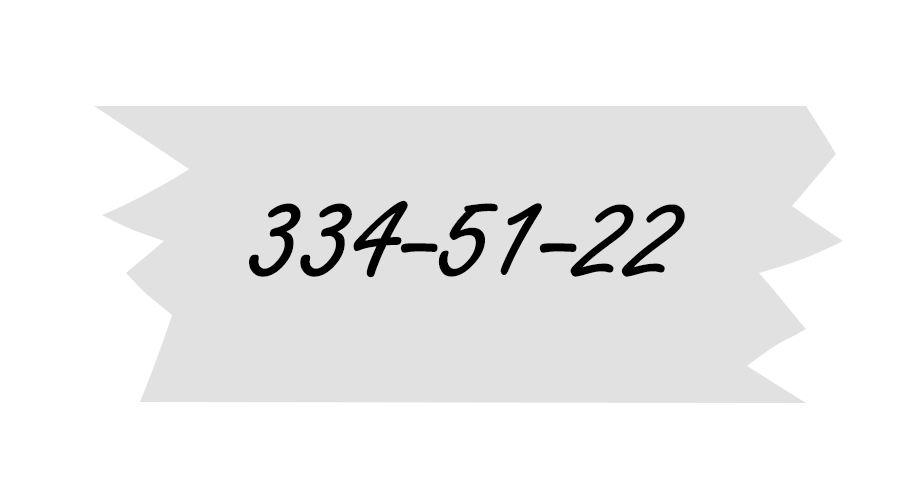
<style>
.page{position:relative;width:900px;height:500px;background:#ffffff}
.page>*{position:absolute;margin:0}
.t1{font:150px "FreestyleScript-Regular";color:#000000}
</style>
<div class="page">
<p class="t1" style="left:249px;top:200px;width:436px;height:78px">334-51-22</p>
</div>
